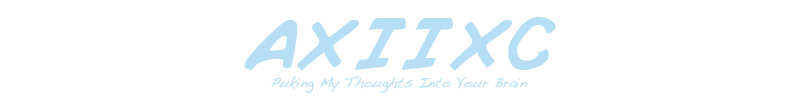
<style>
.page{position:relative;width:800px;height:100px;background:#ffffff}
.page>*{position:absolute;margin:0}
.t1{font:14px "Handwriting-Dakota";color:#b6dff5}
.t2{font:72px "ComicBookNormal";color:#b6dff5}
</style>
<div class="page">
<p class="t1" style="left:244px;top:17px;width:312px;height:76px;text-align:center"><span class="t2">AXIIXC<br></span>Puking My Thoughts Into Your Brain</p>
</div>
